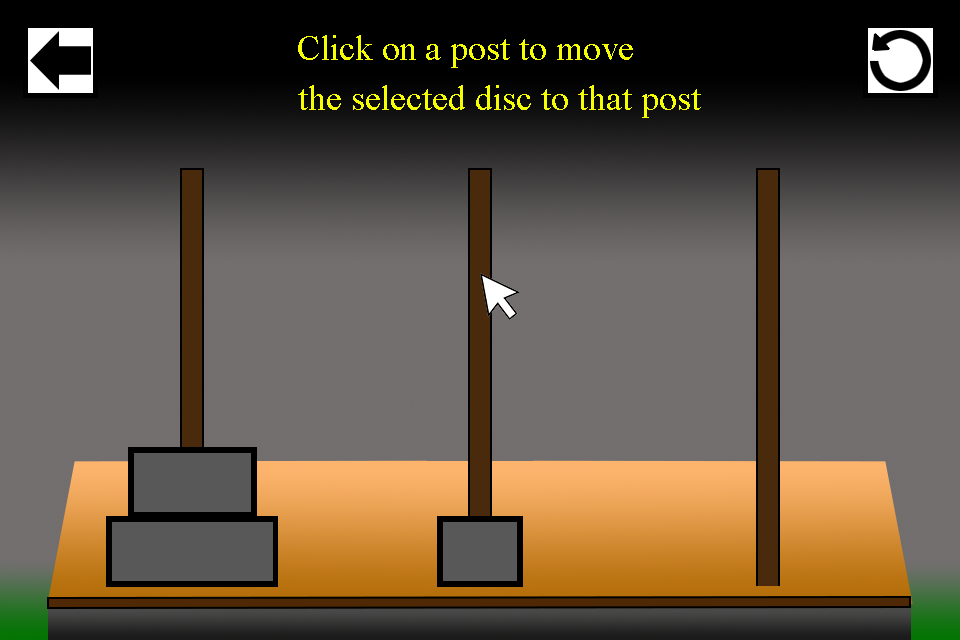
<style>
.page{position:relative;width:960px;height:640px}
.page>*{position:absolute;margin:0}
.t1{font:36px "TimesNewRomanPSMT";color:#f6ff00}
</style>
<div class="page">
<p class="t1" style="left:298px;top:35px;width:335px;height:33px">Click on a post to move</p>
<p class="t1" style="left:298px;top:85px;width:403px;height:33px">the selected disc to that post</p>
</div>
